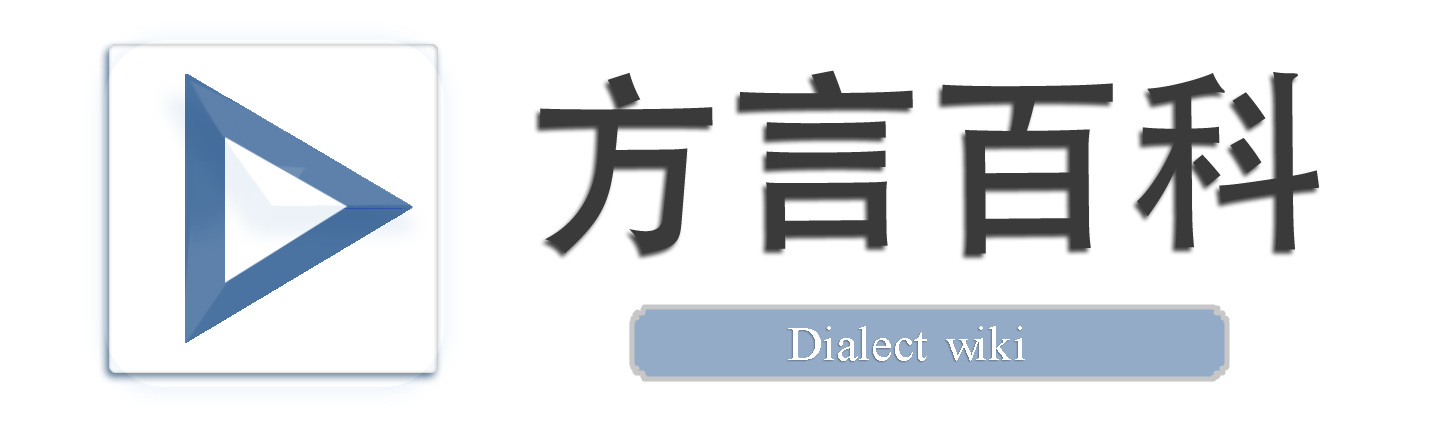
<style>
.page{position:relative;width:1450px;height:426px;background:#ffffff}
.page>*{position:absolute;margin:0}
.t1{font:200px "AdobeHeitiStd-Regular";color:#3b3a3a}
.t2{font:200px "Impact";color:#3b3a3a}
.t3{font:47.9px "TimesNewRomanPSMT";color:#ffffff}
</style>
<div class="page">
<p class="t1" style="left:540px;top:70px;width:780px;height:184px"><span class="t2"><br> </span>方言百科</p>
<p class="t3" style="left:788px;top:326px;width:237px;height:35px">Dialect wiki</p>
</div>
